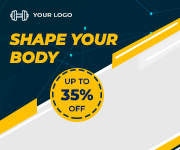
<style>
.page{position:relative;width:180px;height:150px;background:#e8e8e8}
.page>*{position:absolute;margin:0}
.t1{font:5.7px "Montserrat-SemiBold";letter-spacing:0.05em;scale:1.03 1}
.t2{font:15.6px/18px "Montserrat-ExtraBoldItalic";color:#ffc000}
.t3{font:7.8px "Montserrat-SemiBold";color:#002754}
.t4{font:15.6px "Montserrat-ExtraBold";color:#002754}
</style>
<div class="page">
<p class="t1" style="left:33px;top:13px;width:39px;height:4px">YOUR LOGO</p>
<p class="t2" style="left:9px;top:33px;width:109px;height:31px">SHAPE YOUR <br>BODY</p>
<p class="t3" style="left:65px;top:78px;width:25px;height:7px">UP TO</p>
<p class="t4" style="left:60px;top:89px;width:34px;height:12px">35%</p>
<p class="t3" style="left:69px;top:105px;width:16px;height:7px">OFF</p>
</div>
